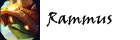
<style>
.page{position:relative;width:140px;height:40px;background:#ffffff}
.page>*{position:absolute;margin:0}
.t1{font:12px "VinerHandITC";color:#000000}
</style>
<div class="page">
<p class="t1" style="left:46px;top:11px;width:66px;height:16px">Rammus</p>
</div>
